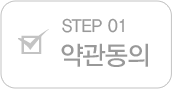
<style>
.page{position:relative;width:172px;height:89px;background:#ffffff}
.page>*{position:absolute;margin:0}
.t1{font:18px "YDVYGO33";color:#999999;scale:0.95 1}
.t2{font:26px "YDVYGO33";letter-spacing:-0.025em;color:#999999;scale:0.95 1}
</style>
<div class="page">
<p class="t1" style="left:62px;top:18px;width:62px;height:15px">STEP 01</p>
<p class="t2" style="left:61px;top:43px;width:87px;height:24px">약관동의</p>
</div>
